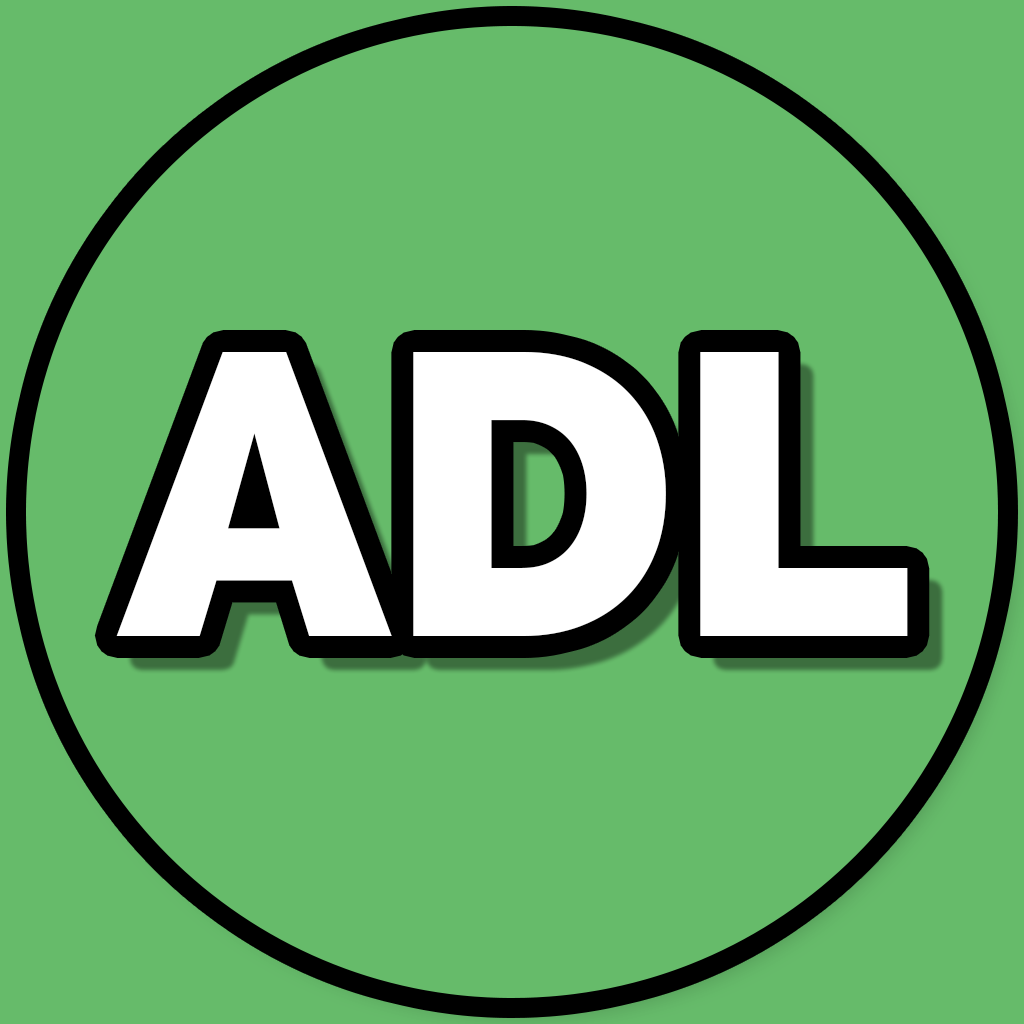
<style>
.page{position:relative;width:1024px;height:1024px;background:#66bb6a}
.page>*{position:absolute;margin:0}
.t1{font:400px "Raleway-Heavy";color:#ffffff}
</style>
<div class="page">
<p class="t1" style="left:116px;top:352px;width:792px;height:284px">ADL</p>
</div>
